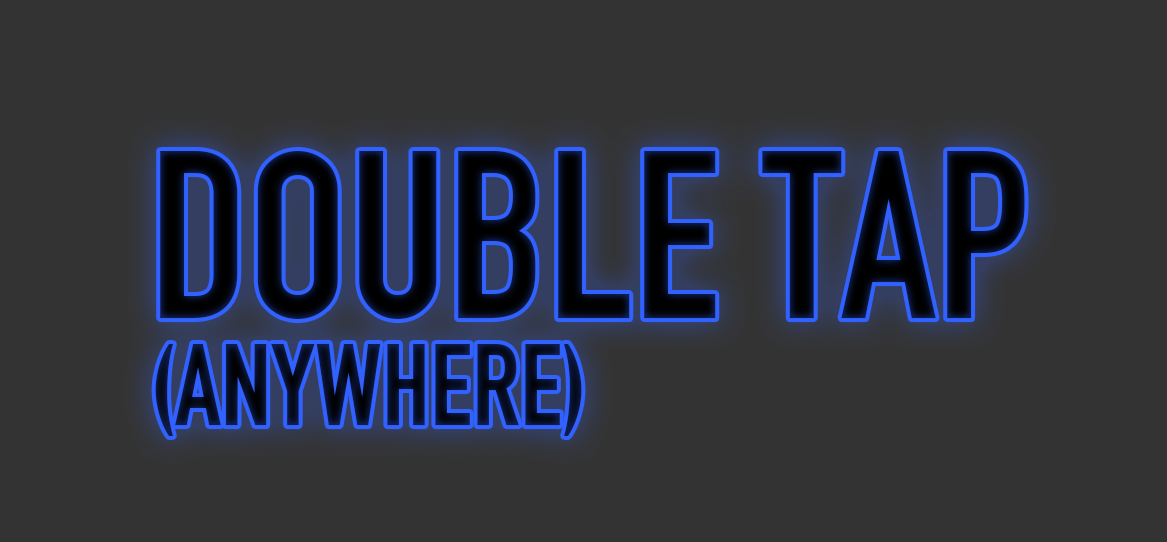
<style>
.page{position:relative;width:1167px;height:542px;background:#333333}
.page>*{position:absolute;margin:0}
.t1{font:233.7px "DINEngschrift";color:#02040b}
.t2{font:113.2px "DINEngschrift";color:#070e26}
</style>
<div class="page">
<p class="t1" style="left:160px;top:151px;width:865px;height:168px">DOUBLE TAP</p>
<p class="t2" style="left:155px;top:343px;width:427px;height:93px">(ANYWHERE)</p>
</div>
